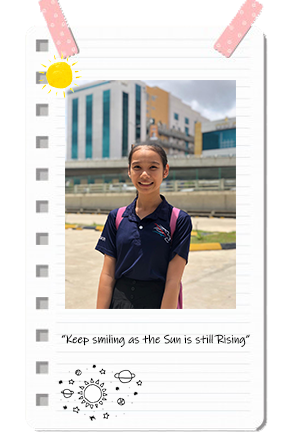
<style>
.page{position:relative;width:296px;height:438px;background:#ffffff}
.page>*{position:absolute;margin:0}
.t1{font:11.5px "InkFree";color:#000000}
</style>
<div class="page">
<p class="t1" style="left:61px;top:334px;width:189px;height:13px">“Keep smiling as the Sun is still Rising”</p>
</div>
